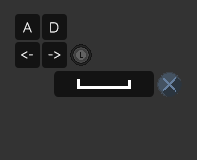
<style>
.page{position:relative;width:197px;height:160px;background:#333333}
.page>*{position:absolute;margin:0}
.t1{font:14px "Quicksand-Light";color:#ffffff}
</style>
<div class="page">
<p class="t1" style="left:23px;top:22px;width:9px;height:11px">A</p>
<p class="t1" style="left:50px;top:22px;width:9px;height:11px">D</p>
<p class="t1" style="left:21px;top:51px;width:12px;height:8px">&lt;-</p>
<p class="t1" style="left:48px;top:51px;width:13px;height:8px">-&gt;</p>
</div>
